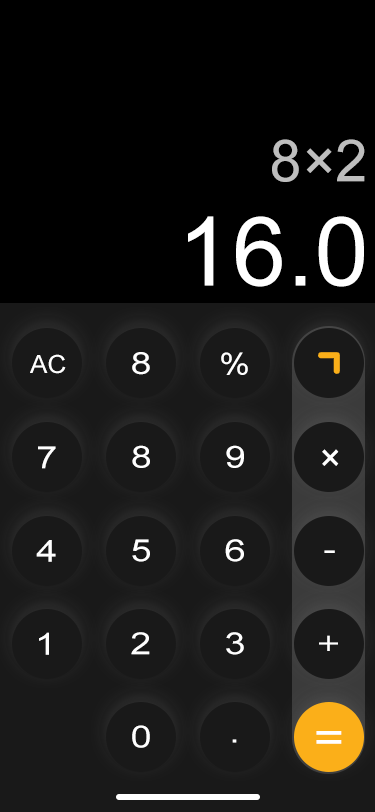
<style>
.page{position:relative;width:375px;height:812px;background:#000000}
.page>*{position:absolute;margin:0}
.t1{font:57.9px "ArialMT";color:#bebebe;text-transform:uppercase}
.t2{font:96.2px "ArialMT";color:#ffffff;text-transform:uppercase}
.t3{font:30.4px "ArialMT";color:#ffffff;text-transform:uppercase;scale:1.24 1}
.t4{font:30.4px "ArialMT";color:#ffffff;text-transform:uppercase;scale:1.13 1}
.t5{font:24.9px "ArialMT";color:#ffffff;text-transform:uppercase;scale:1.05 1}
.t6{font:39px "ArialMT";color:#ffffff;text-transform:uppercase;scale:0.97 1}
.t7{font:30.4px "HKGrotesk-Medium";color:#ffffff;text-transform:uppercase;scale:1.24 1}
.t8{font:42.2px "ArialMT";color:#ffffff;text-transform:uppercase;scale:1.24 1}
</style>
<div class="page">
<p class="t1" style="left:272px;top:139px;width:93px;height:43px">8×2</p>
<p class="t2" style="left:188px;top:216px;width:176px;height:71px">16.0</p>
<p class="t3" style="left:132px;top:352px;width:18px;height:23px">8</p>
<p class="t4" style="left:221px;top:352px;width:27px;height:23px">%</p>
<p class="t5" style="left:30px;top:354px;width:36px;height:20px">ac</p>
<p class="t3" style="left:38px;top:446px;width:18px;height:23px">7</p>
<p class="t3" style="left:132px;top:445px;width:18px;height:23px">8</p>
<p class="t3" style="left:226px;top:445px;width:18px;height:23px">9</p>
<p class="t6" style="left:322px;top:449px;width:17px;height:17px">×</p>
<p class="t3" style="left:36px;top:540px;width:20px;height:22px">4</p>
<p class="t3" style="left:132px;top:539px;width:18px;height:23px">5</p>
<p class="t3" style="left:225px;top:539px;width:19px;height:23px">6</p>
<p class="t3" style="left:324px;top:550px;width:11px;height:3px">-</p>
<p class="t3" style="left:39px;top:632px;width:10px;height:23px">1</p>
<p class="t3" style="left:131px;top:632px;width:19px;height:23px">2</p>
<p class="t3" style="left:226px;top:632px;width:18px;height:23px">3</p>
<p class="t7" style="left:319px;top:635px;width:19px;height:16px">+</p>
<p class="t3" style="left:132px;top:725px;width:18px;height:23px">0</p>
<p class="t8" style="left:316px;top:731px;width:26px;height:13px">=</p>
<p class="t3" style="left:232px;top:739px;width:5px;height:4px">.</p>
</div>
